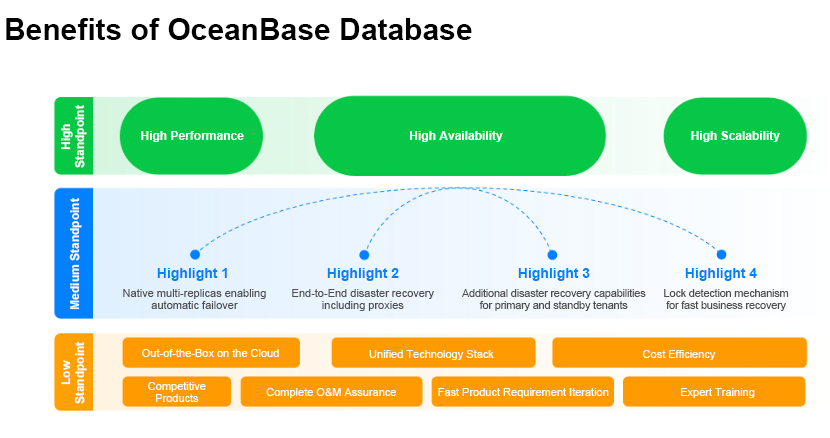
<style>
.page{position:relative;width:830px;height:438px;background:#ffffff}
.page>*{position:absolute;margin:0}
.t1{font:30px "Arial-BoldMT";color:#000000}
.t2{font:12px "Arial-BoldMT";color:#ffffff}
.t3{font:14px "Arial-BoldMT";color:#0181fd}
.t4{font:11px/12px "ArialMT";color:#4e4e4e}
.t5{font:11px/12px "ArialMT";letter-spacing:-0.02em;color:#4e4e4e}
.t6{font:11px "ArialMT";color:#ffffff}
.t7{font:11px/12px "ArialMT";color:#ffffff}
</style>
<div class="page">
<p class="t1" style="left:6px;top:18px;width:466px;height:22px">Benefits of OceanBase Database</p>
<p class="t2" style="left:61px;top:105px;width:26px;height:63px;rotate:-90deg">High Standpoint</p>
<p class="t2" style="left:141px;top:131px;width:103px;height:11px">High Performance</p>
<p class="t2" style="left:410px;top:131px;width:93px;height:11px">High Availability</p>
<p class="t2" style="left:691px;top:131px;width:89px;height:11px">High Scalability</p>
<p class="t2" style="left:69px;top:198px;width:13px;height:112px;rotate:-90deg">Medium Standpoint</p>
<p class="t3" style="left:157px;top:268px;width:70px;height:13px">Highlight 1</p>
<p class="t3" style="left:327px;top:268px;width:72px;height:13px">Highlight 2</p>
<p class="t3" style="left:518px;top:268px;width:72px;height:13px">Highlight 3</p>
<p class="t3" style="left:685px;top:268px;width:72px;height:13px">Highlight 4</p>
<p class="t4" style="left:123px;top:289px;width:143px;height:20px;text-align:center">Native multi-replicas enabling automatic failover</p>
<p class="t4" style="left:292px;top:289px;width:142px;height:22px;text-align:center">End-to-End disaster recovery including proxies</p>
<p class="t5" style="left:462px;top:289px;width:184px;height:22px;text-align:center">Additional disaster recovery capabilities for primary and standby tenants</p>
<p class="t5" style="left:664px;top:289px;width:125px;height:22px;text-align:center">Lock detection mechanism for fast business recovery</p>
<p class="t2" style="left:61px;top:342px;width:26px;height:62px;rotate:-90deg">Low Standpoint</p>
<p class="t6" style="left:142px;top:349px;width:137px;height:8px">Out-of-the-Box on the Cloud</p>
<p class="t6" style="left:369px;top:350px;width:125px;height:10px">Unified Technology Stack</p>
<p class="t6" style="left:643px;top:350px;width:73px;height:10px">Cost Efficiency</p>
<p class="t7" style="left:148px;top:382px;width:58px;height:20px;text-align:center">Competitive Products</p>
<p class="t6" style="left:266px;top:388px;width:130px;height:10px">Complete O&amp;M Assurance</p>
<p class="t6" style="left:438px;top:388px;width:171px;height:10px">Fast Product Requirement Iteration</p>
<p class="t6" style="left:681px;top:388px;width:74px;height:10px">Expert Training</p>
</div>
